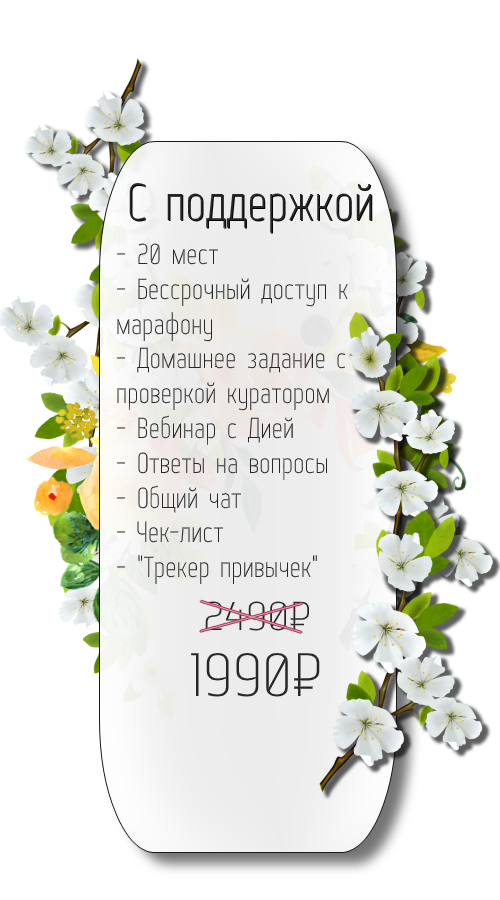
<style>
.page{position:relative;width:500px;height:900px;background:#ffffff}
.page>*{position:absolute;margin:0}
.t1{font:52px "WebServeroff";color:#272727}
.t2{font:29px "WebServeroff";color:#272727}
.t3{font:40.4px "WebServeroff";color:#272727;scale:1.28 1}
.t4{font:61.2px "WebServeroff";color:#272727;scale:1.15 1}
</style>
<div class="page">
<p class="t1" style="left:129px;top:183px;width:243px;height:50px">С поддержкой</p>
<p class="t2" style="left:117px;top:243px;width:231px;height:341px">- 20 мест<br>- Бессрочный доступ к<br>марафону<br>- Домашнее задание с<br>проверкой куратором<br>- Вебинар с Дией<br>- Ответы на вопросы<br>- Общий чат<br>- Чек-лист<br>- "Трекер привычек"</p>
<p class="t3" style="left:205px;top:601px;width:104px;height:30px">2490₽</p>
<p class="t4" style="left:191px;top:653px;width:129px;height:44px">1990₽</p>
</div>
